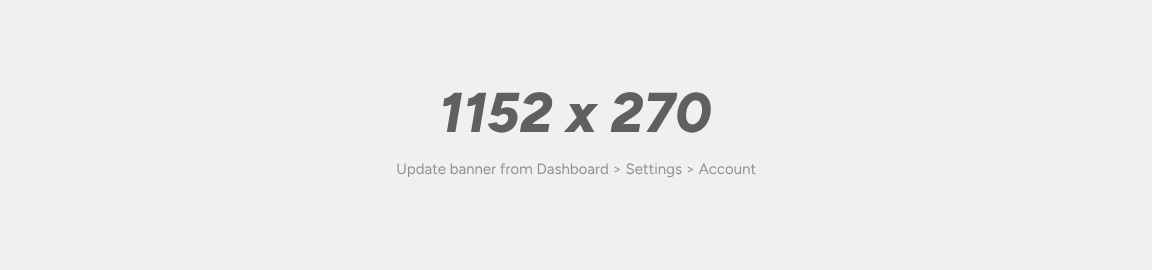
<style>
.page{position:relative;width:1152px;height:270px;background:#f0f0f0}
.page>*{position:absolute;margin:0}
.t1{font:56px "Figtree-ExtraBoldItalic";color:#606060}
.t2{font:15px "Figtree-Regular";color:#909090}
</style>
<div class="page">
<p class="t1" style="left:443px;top:92px;width:269px;height:41px">1152 x 270</p>
<p class="t2" style="left:397px;top:163px;width:359px;height:15px">Update banner from Dashboard &gt; Settings &gt; Account</p>
</div>
